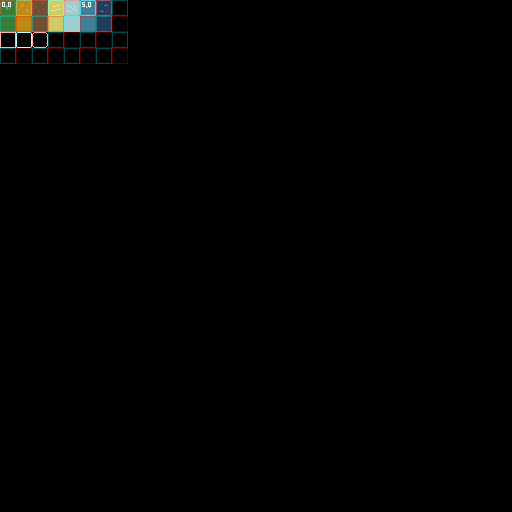
<style>
.page{position:relative;width:512px;height:512px;background:#000000}
.page>*{position:absolute;margin:0}
.t1{font:8px "PixelMillennium";color:#ffffff;text-transform:uppercase}
</style>
<div class="page">
<p class="t1" style="left:2px;top:2px;width:9px;height:5px">0.0</p>
<p class="t1" style="left:82px;top:2px;width:9px;height:5px">5.0</p>
</div>
